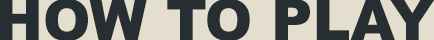
<style>
.page{position:relative;width:434px;height:40px;background:#e3decd}
.page>*{position:absolute;margin:0}
.t1{font:57px "Arial-Black";color:#262e31;text-transform:uppercase}
</style>
<div class="page">
<p class="t1" style="left:0px;top:0px;width:435px;height:41px">How To Play</p>
</div>
